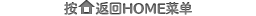
<style>
.page{position:relative;width:256px;height:16px;background:#ffffff}
.page>*{position:absolute;margin:0}
.t1{font:13.3px "FZFW-QingYinTiS-B--GB1-0";color:#797979}
.t2{font:13.3px "FZFW-QingYinTiS-B--GB1-0";letter-spacing:1.36em;color:#797979}
.t3{font:13.3px "FZFW-QingYinTiS-B--GB1-0";letter-spacing:3.26em;color:#797979}
</style>
<div class="page">
<p class="t1" style="left:64px;top:2px;width:128px;height:13px"><span class="t2">按</span>返<span class="t3">回</span>菜单</p>
</div>
